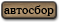
<style>
.page{position:relative;width:60px;height:24px}
.page>*{position:absolute;margin:0}
.t1{font:10.8px "CooperMediumCBT";letter-spacing:0.01em;color:#000000}
</style>
<div class="page">
<p class="t1" style="left:4px;top:5px;width:50px;height:11px">автосбор</p>
</div>
